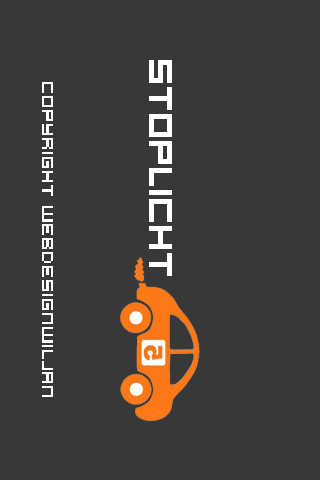
<style>
.page{position:relative;width:320px;height:480px;background:#383838}
.page>*{position:absolute;margin:0}
.t1{font:36px "Hooge0553";color:#ffffff}
.t2{font:18px "Hooge0553";color:#ffffff}
</style>
<div class="page">
<p class="t1" style="left:149px;top:60px;width:23px;height:216px;rotate:90deg">Stoplicht</p>
<p class="t2" style="left:42px;top:82px;width:11px;height:315px;rotate:90deg">copyright webdesignwiljan</p>
</div>
